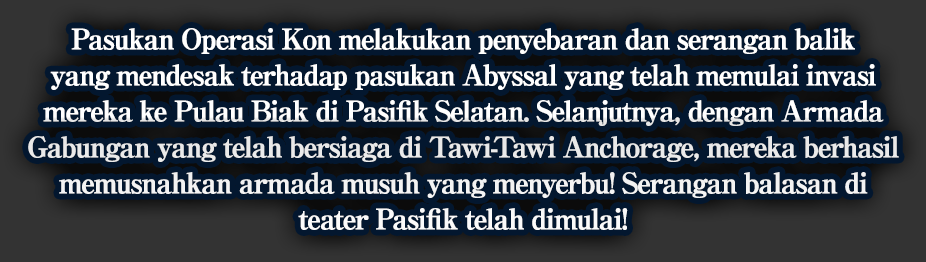
<style>
.page{position:relative;width:926px;height:262px;background:#03172f}
.page>*{position:absolute;margin:0}
.t1{font:28px/36px "RyuminPro-ExBold";letter-spacing:-0.08em;color:#ffffff;font-weight:bold}
</style>
<div class="page">
<p class="t1" style="left:28px;top:28px;width:871px;height:202px;text-align:center">Pasukan Operasi Kon melakukan penyebaran dan serangan balik<br>yang mendesak terhadap pasukan Abyssal yang telah memulai invasi<br>mereka ke Pulau Biak di Pasifik Selatan. Selanjutnya, dengan Armada<br>Gabungan yang telah bersiaga di Tawi-Tawi Anchorage, mereka berhasil<br>memusnahkan armada musuh yang menyerbu! Serangan balasan di<br>teater Pasifik telah dimulai!</p>
</div>
